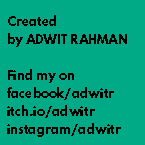
<style>
.page{position:relative;width:145px;height:145px;background:#00aa87}
.page>*{position:absolute;margin:0}
.t1{font:12px/18px "LeagueSpartan-Bold";color:#000000}
</style>
<div class="page">
<p class="t1" style="left:7px;top:15px;width:120px;height:122px">Created<br>by ADWIT RAHMAN<br><br>Find my on <br>facebook/adwitr<br>itch.io/adwitr<br>instagram/adwitr</p>
</div>
